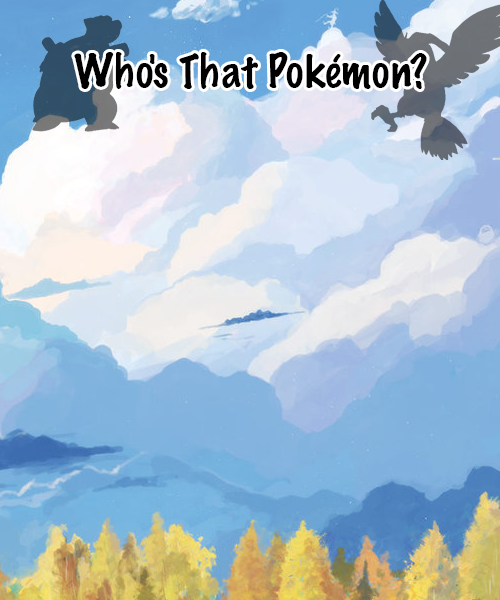
<style>
.page{position:relative;width:500px;height:600px}
.page>*{position:absolute;margin:0}
.t1{font:41.7px "MarkerFelt-Thin";letter-spacing:0.005em;color:#000000}
.t2{font:41.7px "MarkerFelt-Thin";letter-spacing:-0.005em;color:#000000}
</style>
<div class="page">
<p class="t1" style="left:74px;top:52px;width:353px;height:37px"><span class="t2">Who</span>'s That Pokémon?</p>
</div>
